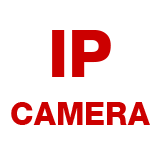
<style>
.page{position:relative;width:159px;height:159px;background:#ffffff}
.page>*{position:absolute;margin:0}
.t1{font:48px/48px "PSLEmpireExtra";color:#cc0000}
.t2{font:100px/48px "PSLEmpireExtra";color:#cc0000}
</style>
<div class="page">
<p class="t1" style="left:11px;top:30px;width:139px;height:95px;text-align:center"><span class="t2">IP<br></span>CAMERA</p>
</div>
